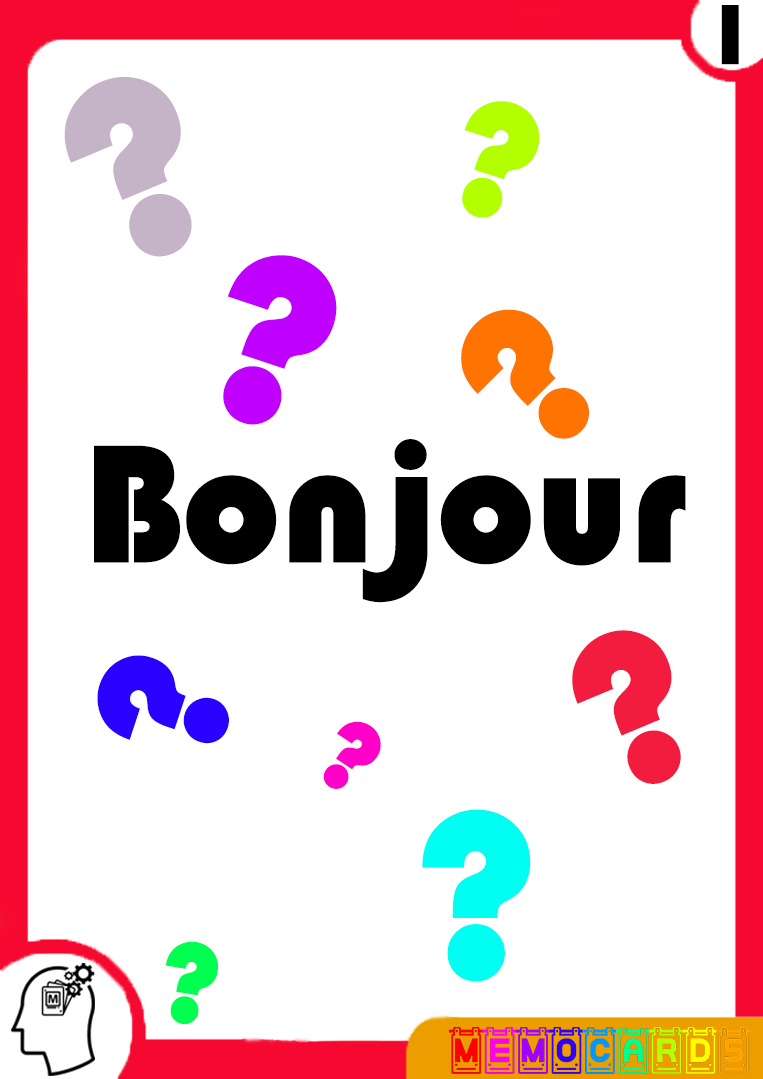
<style>
.page{position:relative;width:763px;height:1079px;background:#ffffff}
.page>*{position:absolute;margin:0}
.t1{font:88.6px "Bauhaus93";color:#000000}
.t2{font:266.8px "Bauhaus93";color:#c5b3c7}
.t3{font:171.4px "Bauhaus93";color:#b3ff00}
.t4{font:249.5px "Bauhaus93";color:#bf00ff}
.t5{font:216.1px "Bauhaus93";color:#ff7300}
.t6{font:175.1px "Bauhaus93";color:#000000}
.t7{font:228.2px "Bauhaus93";color:#f21c3f}
.t8{font:193.7px "Bauhaus93";color:#2a00ff}
.t9{font:105.2px "Bauhaus93";color:#ff00c8}
.t10{font:246.5px "Bauhaus93";color:#00fff2}
.t11{font:119px "Bauhaus93";color:#00ff51}
</style>
<div class="page">
<p class="t1" style="left:721px;top:5px;width:18px;height:60px">1</p>
<p class="t2" style="left:64px;top:77px;width:128px;height:180px;rotate:-23deg">?</p>
<p class="t3" style="left:462px;top:101px;width:78px;height:117px;rotate:18deg">?</p>
<p class="t4" style="left:223px;top:255px;width:114px;height:170px;rotate:18deg">?</p>
<p class="t5" style="left:461px;top:309px;width:128px;height:130px;rotate:-45deg">?</p>
<p class="t6" style="left:94px;top:439px;width:592px;height:164px">Bonjour</p>
<p class="t7" style="left:572px;top:630px;width:109px;height:154px;rotate:-23deg">?</p>
<p class="t8" style="left:97px;top:655px;width:132px;height:89px;rotate:-72deg">?</p>
<p class="t9" style="left:323px;top:721px;width:58px;height:68px;rotate:34deg">?</p>
<p class="t10" style="left:422px;top:809px;width:109px;height:173px">?</p>
<p class="t11" style="left:165px;top:941px;width:53px;height:84px;rotate:10deg">?</p>
</div>
